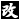
<style>
.page{position:relative;width:20px;height:20px;background:#000000}
.page>*{position:absolute;margin:0}
.t1{font:16.7px "HakusyuKaisyoExtraBold_kk";letter-spacing:0.1em;color:#ffffff;font-weight:bold}
</style>
<div class="page">
<p class="t1" style="left:1px;top:3px;width:17px;height:15px">改</p>
</div>
